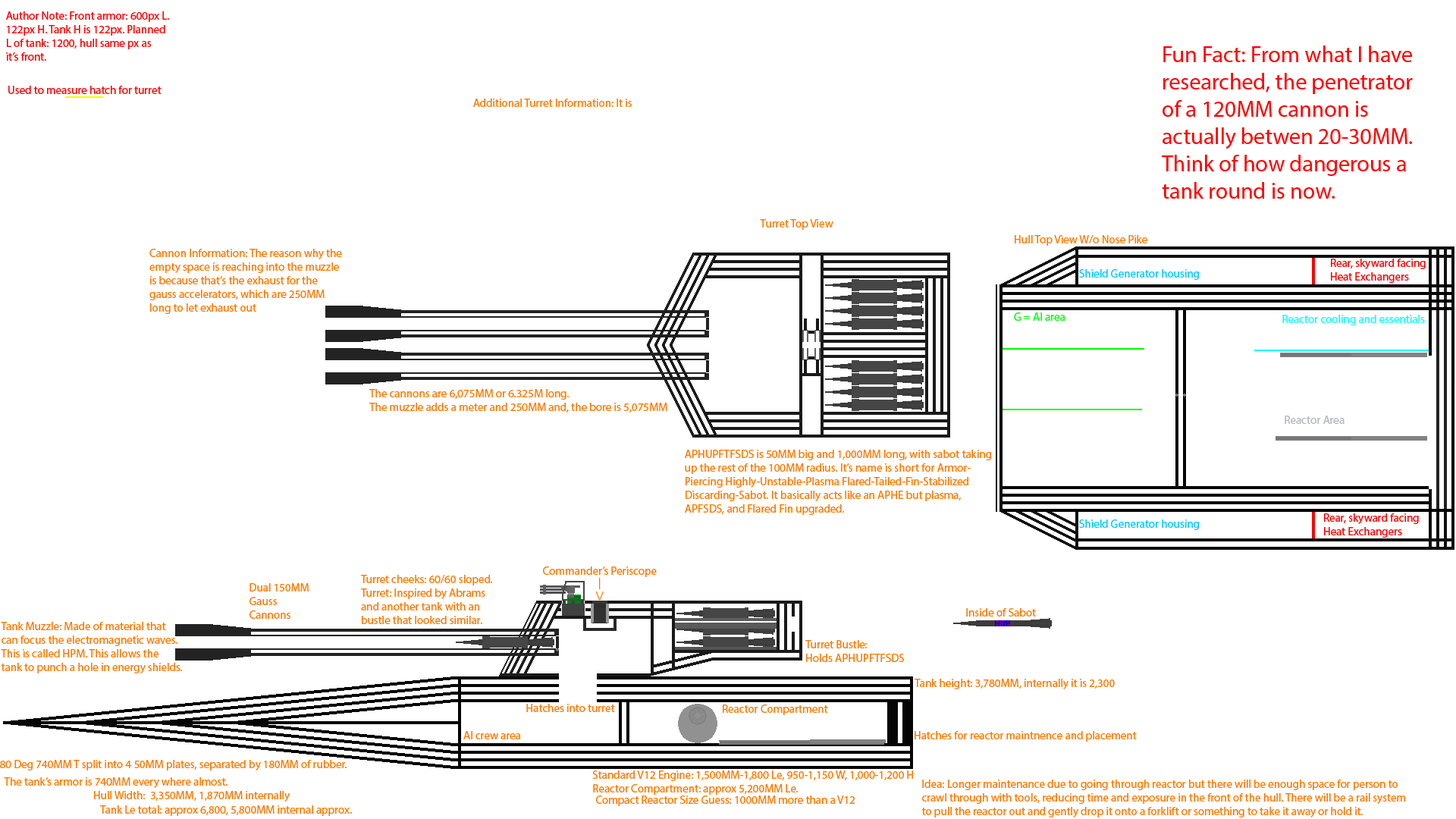
<style>
.page{position:relative;width:1456px;height:819px;background:#ffffff}
.page>*{position:absolute;margin:0}
.t1{font:11.4px "MyriadPro-Regular";color:#ff0000}
.t2{font:22.7px "MyriadPro-Regular";color:#ff0000}
.t3{font:11.4px "MyriadPro-Regular";color:#ff7800}
.t4{font:11.4px "MyriadPro-Regular";color:#00c8ff}
.t5{font:11.4px "MyriadPro-Regular";color:#00ff00}
.t6{font:11.4px "MyriadPro-Regular";color:#13fafe}
.t7{font:11.4px "MyriadPro-Regular";color:#b3b6c1}
.t8{font:8.5px "MyriadPro-Regular";color:#0000c8}
</style>
<div class="page">
<p class="t1" style="left:6px;top:11px;width:163px;height:50px">Author Note: Front armor: 600px L.<br>122px H. Tank H is 122px. Planned<br>L of tank: 1200, hull same px as<br>it’s front.</p>
<p class="t2" style="left:1162px;top:45px;width:251px;height:154px">Fun Fact: From what I have<br>researched, the penetrator<br>of a 120MM cannon is<br>actually betwen 20-30MM.<br>Think of how dangerous a<br>tank round is now.</p>
<p class="t1" style="left:8px;top:86px;width:154px;height:8px">Used to measure hatch for turret</p>
<p class="t3" style="left:473px;top:99px;width:159px;height:8px">Additional Turret Information: It is</p>
<p class="t3" style="left:760px;top:219px;width:73px;height:11px">Turret Top View</p>
<p class="t3" style="left:1015px;top:235px;width:132px;height:11px">Hull Top View W/o Nose Pike</p>
<p class="t3" style="left:149px;top:249px;width:193px;height:65px">Cannon Information: The reason why the<br>empty space is reaching into the muzzle<br>is because that’s the exhaust for the<br>gauss accelerators, which are 250MM<br>long to let exhaust out</p>
<p class="t4" style="left:1079px;top:269px;width:120px;height:11px">Shield Generator housing</p>
<p class="t1" style="left:1331px;top:259px;width:95px;height:24px">Rear, skyward facing<br>Heat Exchangers</p>
<p class="t5" style="left:1014px;top:312px;width:51px;height:9px">G = AI area</p>
<p class="t6" style="left:1282px;top:315px;width:143px;height:10px">Reactor cooling and essentials</p>
<p class="t3" style="left:369px;top:389px;width:298px;height:24px">The cannons are 6,075MM or 6.325M long.<br>The muzzle adds a meter and 250MM and, the bore is 5,075MM</p>
<p class="t7" style="left:1285px;top:416px;width:60px;height:8px">Reactor Area</p>
<p class="t3" style="left:685px;top:450px;width:306px;height:65px">APHUPFTFSDS is 50MM big and 1,000MM long, with sabot taking<br>up the rest of the 100MM radius. It’s name is short for Armor-<br>Piercing Highly-Unstable-Plasma Flared-Tailed-Fin-Stabilized<br>Discarding-Sabot. It basically acts like an APHE but plasma,<br>APFSDS, and Flared Fin upgraded.</p>
<p class="t4" style="left:1079px;top:519px;width:120px;height:11px">Shield Generator housing</p>
<p class="t1" style="left:1324px;top:513px;width:95px;height:25px">Rear, skyward facing<br>Heat Exchangers</p>
<p class="t3" style="left:543px;top:566px;width:114px;height:11px">Commander’s Periscope</p>
<p class="t3" style="left:361px;top:575px;width:131px;height:49px">Turret cheeks: 60/60 sloped.<br>Turret: Inspired by Abrams<br>and another tank with an<br>bustle that looked similar.</p>
<p class="t3" style="left:595px;top:577px;width:9px;height:24px">|<br>\/</p>
<p class="t3" style="left:249px;top:583px;width:60px;height:36px">Dual 150MM<br>Gauss<br>Cannons</p>
<p class="t3" style="left:966px;top:608px;width:70px;height:9px">Inside of Sabot</p>
<p class="t3" style="left:1px;top:622px;width:181px;height:51px">Tank Muzzle: Made of material that<br>can focus the electromagnetic waves.<br>This is called HPM. This allows the<br>tank to punch a hole in energy shields.</p>
<p class="t8" style="left:995px;top:620px;width:15px;height:6px">HUP</p>
<p class="t3" style="left:805px;top:640px;width:99px;height:22px">Turret Bustle:<br>Holds APHUPFTFSDS</p>
<p class="t3" style="left:915px;top:679px;width:200px;height:10px">Tank height: 3,780MM, internally it is 2,300</p>
<p class="t3" style="left:526px;top:704px;width:89px;height:8px">Hatches into turret</p>
<p class="t3" style="left:723px;top:704px;width:105px;height:11px">Reactor Compartment</p>
<p class="t3" style="left:463px;top:731px;width:58px;height:8px">AI crew area</p>
<p class="t3" style="left:915px;top:731px;width:222px;height:11px">Hatches for reactor maintnence and placement</p>
<p class="t3" style="left:0px;top:760px;width:347px;height:10px">80 Deg 740MM T split into 4 50MM plates, separated by 180MM of rubber.</p>
<p class="t3" style="left:592px;top:770px;width:321px;height:25px">Standard V12 Engine: 1,500MM-1,800 Le, 950-1,150 W, 1,000-1,200 H<br>Reactor Compartment: approx 5,200MM Le.</p>
<p class="t3" style="left:4px;top:777px;width:223px;height:11px">The tank’s armor is 740MM every where almost.</p>
<p class="t3" style="left:921px;top:780px;width:484px;height:37px">Idea: Longer maintenance due to going through reactor but there will be enough space for person to<br>crawl through with tools, reducing time and exposure in the front of the hull. There will be a rail system<br>to pull the reactor out and gently drop it onto a forklift or something to take it away or hold it.</p>
<p class="t3" style="left:94px;top:791px;width:196px;height:11px">Hull Width:  3,350MM, 1,870MM internally</p>
<p class="t3" style="left:596px;top:795px;width:259px;height:11px">Compact Reactor Size Guess: 1000MM more than a V12</p>
<p class="t3" style="left:100px;top:805px;width:252px;height:11px">Tank Le total: approx 6,800, 5,800MM internal approx.</p>
</div>
